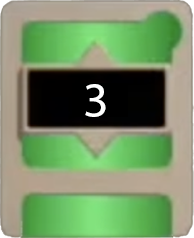
<style>
.page{position:relative;width:194px;height:238px}
.page>*{position:absolute;margin:0}
.t1{font:50px "MyriadPro-Regular";color:#ffffff}
</style>
<div class="page">
<p class="t1" style="left:85px;top:84px;width:21px;height:33px">3</p>
</div>
